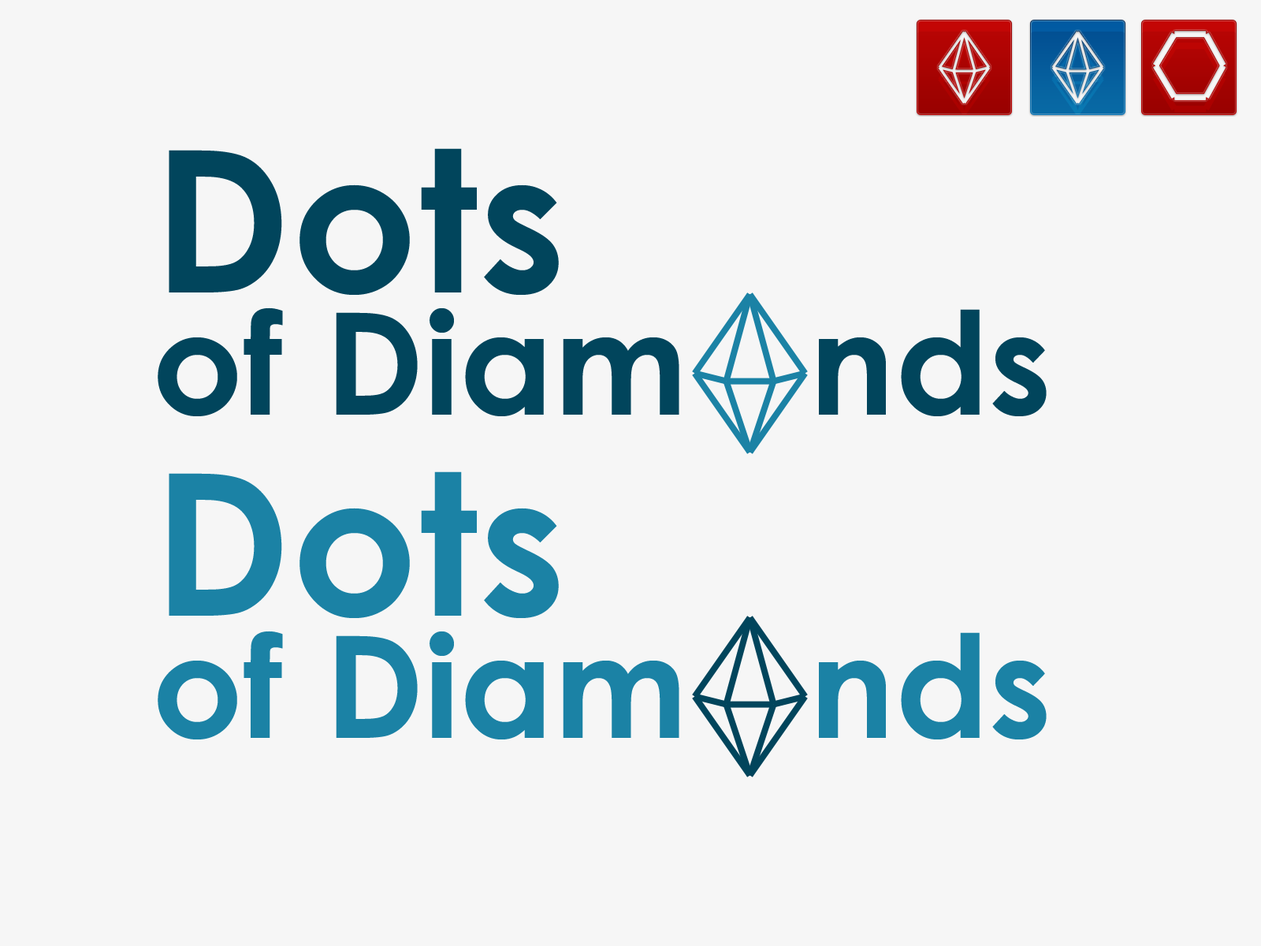
<style>
.page{position:relative;width:1261px;height:946px;background:#f6f6f6}
.page>*{position:absolute;margin:0}
.t1{font:197px "CenturyGothic-Bold";letter-spacing:0.005em;color:#01455c}
.t2{font:141.9px "CenturyGothic-Bold";letter-spacing:0.005em;color:#01455c}
.t3{font:197px "CenturyGothic-Bold";letter-spacing:0.005em;color:#1b82a5}
.t4{font:141.9px "CenturyGothic-Bold";letter-spacing:0.005em;color:#1b82a5}
</style>
<div class="page">
<p class="t1" style="left:169px;top:148px;width:390px;height:147px">Dots</p>
<p class="t2" style="left:158px;top:307px;width:889px;height:109px">of Diam   nds</p>
<p class="t3" style="left:169px;top:471px;width:390px;height:147px">Dots</p>
<p class="t4" style="left:158px;top:630px;width:889px;height:109px">of Diam   nds</p>
</div>
